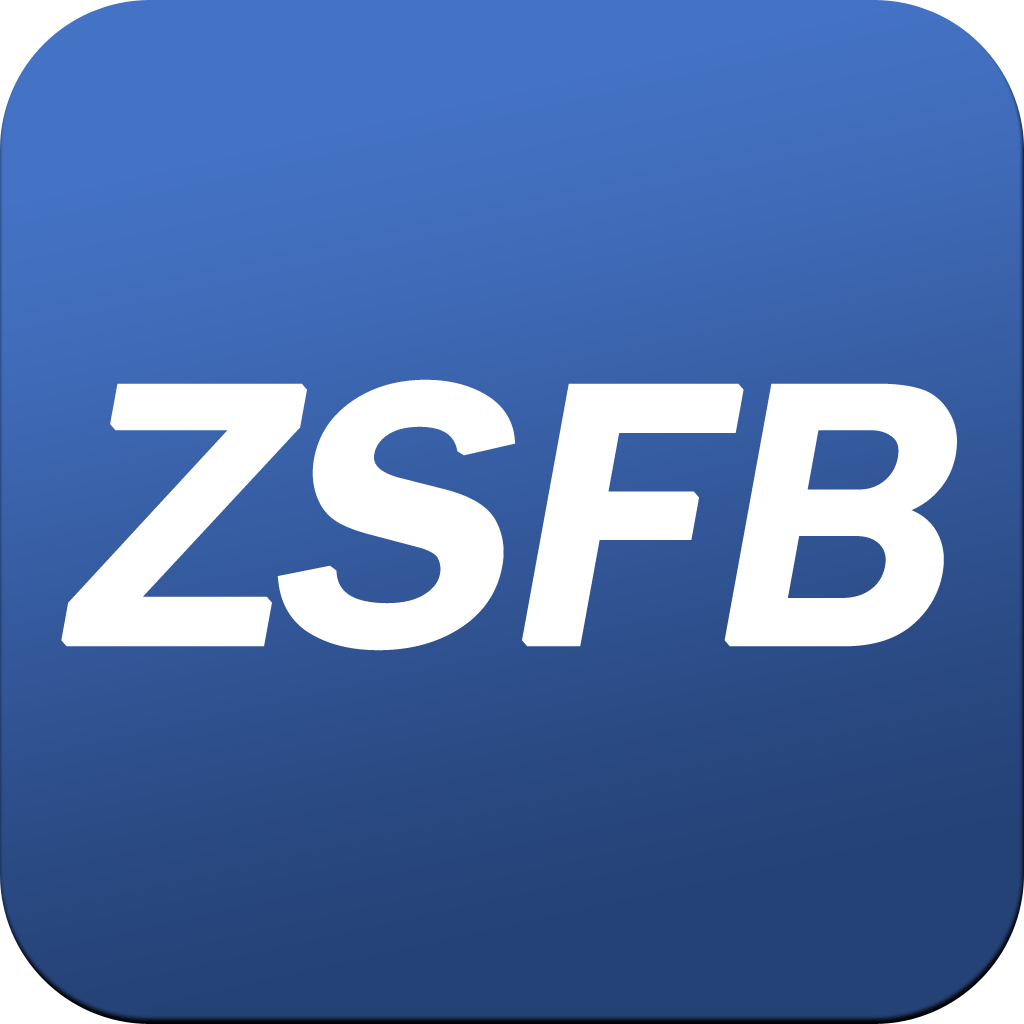
<style>
.page{position:relative;width:1024px;height:1024px}
.page>*{position:absolute;margin:0}
.t1{font:378.3px "FranklinGothic-Medium";letter-spacing:-0.019em;color:#ffffff;font-weight:bold;font-style:italic;scale:1.03 1}
</style>
<div class="page">
<p class="t1" style="left:61px;top:379px;width:896px;height:272px">ZSFB</p>
</div>
